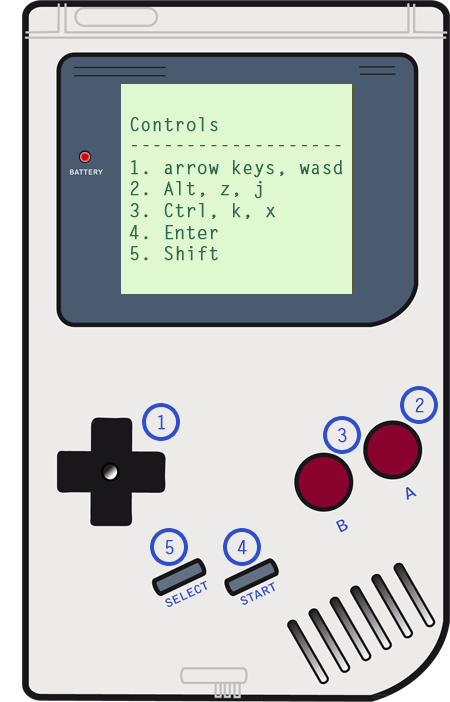
<style>
.page{position:relative;width:450px;height:702px;background:#edeaea}
.page>*{position:absolute;margin:0}
.t1{font:18px "LetterGothicStd";color:#306850;font-weight:bold}
.t2{font:18px "LetterGothicStd";color:#2e4fcb;font-weight:bold}
</style>
<div class="page">
<p class="t1" style="left:129px;top:117px;width:213px;height:144px">Controls<br>-------------------<br>1. arrow keys, wasd<br>2. Alt, z, j<br>3. Ctrl, k, x<br>4. Enter<br>5. Shift</p>
<p class="t2" style="left:415px;top:398px;width:9px;height:15px">2</p>
<p class="t2" style="left:158px;top:415px;width:7px;height:15px">1</p>
<p class="t2" style="left:338px;top:428px;width:9px;height:15px">3</p>
<p class="t2" style="left:165px;top:540px;width:9px;height:15px">5</p>
<p class="t2" style="left:237px;top:540px;width:10px;height:15px">4</p>
</div>
